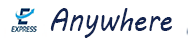
<style>
.page{position:relative;width:188px;height:43px;background:#ffffff}
.page>*{position:absolute;margin:0}
.t1{font:32px "MVBoli";color:#132450;scale:0.86 1}
</style>
<div class="page">
<p class="t1" style="left:50px;top:8px;width:122px;height:30px">Anywhere</p>
</div>
